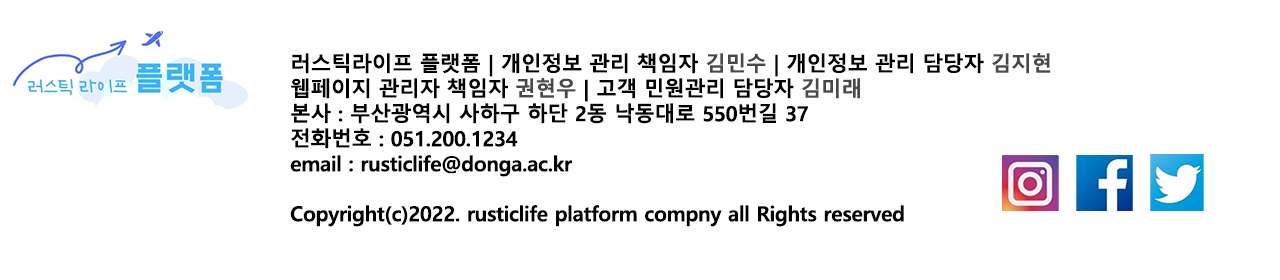
<style>
.page{position:relative;width:1280px;height:280px;background:#ffffff}
.page>*{position:absolute;margin:0}
.t1{font:20.8px "MalgunGothicBold";letter-spacing:-0.02em;color:#000000}
.t2{font:20.8px "MalgunGothicBold";letter-spacing:-0.02em;color:#484848}
</style>
<div class="page">
<p class="t1" style="left:290px;top:53px;width:761px;height:174px">러스틱라이프 플랫폼 | 개인정보 관리 책임자 <span class="t2">김민수 </span>| 개인정보 관리 담당자 <span class="t2">김지현<br></span>웹페이지 관리자 책임자 <span class="t2">권현우</span> | 고객 민원관리 담당자 <span class="t2">김미래<br></span>본사 : 부산광역시 사하구 하단 2동 낙동대로 550번길 37<br>전화번호 : 051.200.1234<br>email : rusticlife@donga.ac.kr<br><br>Copyright(c)2022. rusticlife platform compny all Rights reserved</p>
</div>
